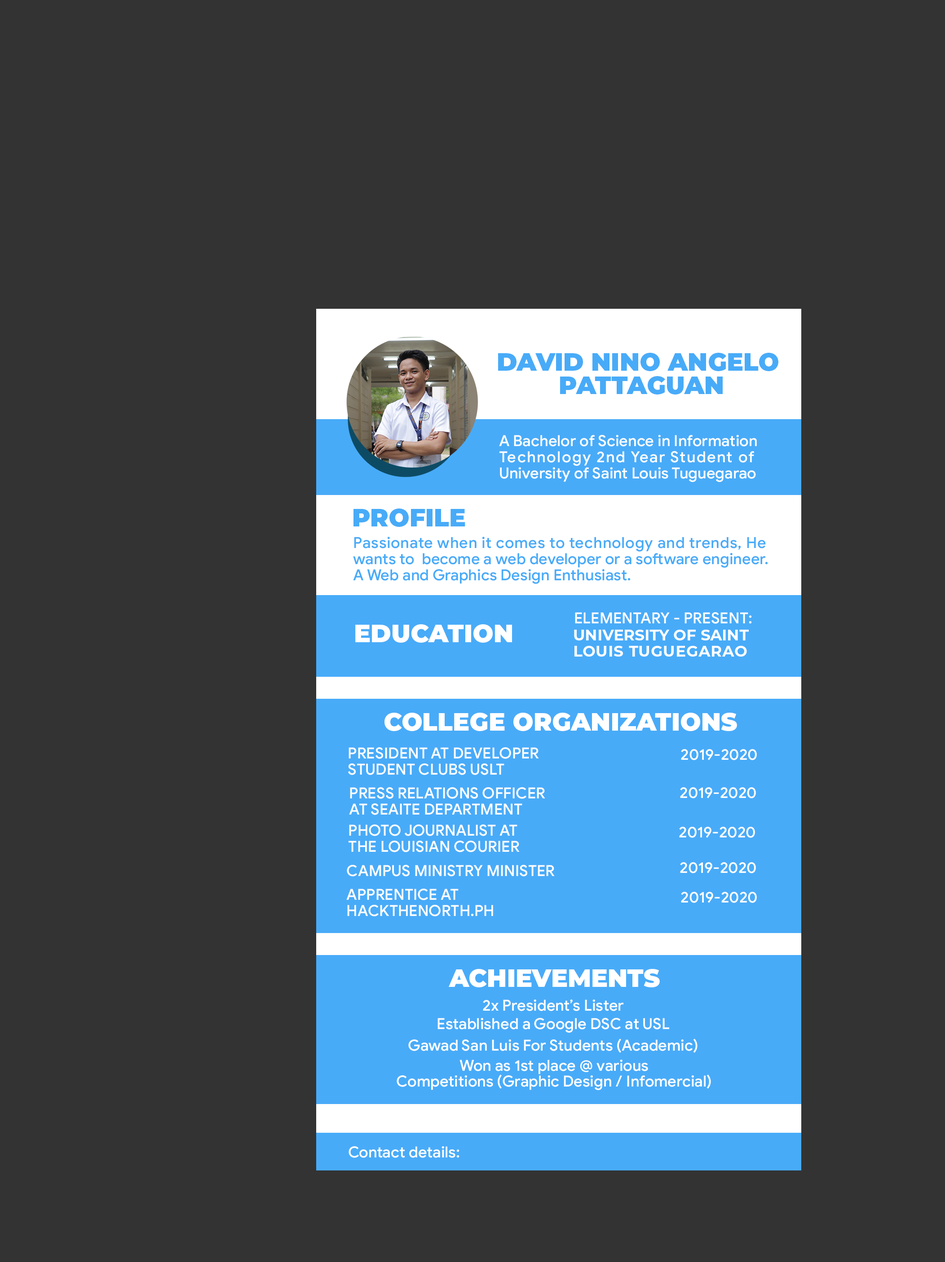
<style>
.page{position:relative;width:945px;height:1262px;background:#333333}
.page>*{position:absolute;margin:0}
.t1{font:24.7px/23.3px "Montserrat-Black";color:#48abf8}
.t2{font:15.3px/16.2px "GoogleSans-Medium";color:#ffffff}
.t3{font:15.3px/16.2px "GoogleSans-Medium";letter-spacing:0.07em;color:#ffffff}
.t4{font:24.7px "Montserrat-Black";color:#48abf8}
.t5{font:15.3px/16.2px "GoogleSans-Medium";color:#48abf8}
.t6{font:15.3px/16.2px "GoogleSans-Medium";letter-spacing:0.024em;color:#48abf8}
.t7{font:15.3px "GoogleSans-Medium";color:#ffffff}
.t8{font:24.7px "Montserrat-Black";color:#ffffff}
.t9{font:15.3px/16.2px "Montserrat-Bold";color:#ffffff}
.t10{font:15.3px/16.2px "Montserrat-Bold";letter-spacing:0.03em;color:#ffffff}
.t11{font:15.3px/15.7px "GoogleSans-Medium";color:#ffffff}
</style>
<div class="page">
<p class="t1" style="left:498px;top:353px;width:280px;height:42px;text-align:center">DAVID NINO ANGELO <br>PATTAGUAN</p>
<p class="t2" style="left:499px;top:435px;width:257px;height:47px;text-align:right">A Bachelor of Science in Information <br><span class="t3">Technology 2nd Year Student of<br></span>University of Saint Louis Tuguegarao</p>
<p class="t4" style="left:353px;top:509px;width:112px;height:18px">PROFILE</p>
<p class="t5" style="left:353px;top:537px;width:415px;height:47px;text-align:right"><span class="t6">Passionate when it comes to technology and trends, He</span> <br>wants to  become a web developer or a software engineer.<br>A Web and Graphics Design Enthusiast.</p>
<p class="t7" style="left:575px;top:612px;width:177px;height:12px">ELEMENTARY - PRESENT:</p>
<p class="t8" style="left:355px;top:624px;width:157px;height:19px">EDUCATION</p>
<p class="t9" style="left:574px;top:630px;width:174px;height:27px;text-align:right">UNIVERSITY OF SAINT <br><span class="t10">LOUIS TUGUEGARAO</span></p>
<p class="t8" style="left:384px;top:713px;width:353px;height:18px">COLLEGE ORGANIZATIONS</p>
<p class="t2" style="left:348px;top:747px;width:191px;height:28px;text-align:right">PRESIDENT AT DEVELOPER <br>STUDENT CLUBS USLT</p>
<p class="t7" style="left:681px;top:749px;width:75px;height:12px">2019-2020</p>
<p class="t2" style="left:349px;top:787px;width:196px;height:28px;text-align:right">PRESS RELATIONS OFFICER<br>AT SEAITE DEPARTMENT</p>
<p class="t7" style="left:680px;top:787px;width:76px;height:12px">2019-2020</p>
<p class="t2" style="left:348px;top:825px;width:171px;height:28px;text-align:right">PHOTO JOURNALIST AT<br>THE LOUISIAN COURIER</p>
<p class="t7" style="left:679px;top:827px;width:76px;height:11px">2019-2020</p>
<p class="t7" style="left:347px;top:865px;width:207px;height:12px">CAMPUS MINISTRY MINISTER</p>
<p class="t7" style="left:680px;top:862px;width:76px;height:12px">2019-2020</p>
<p class="t2" style="left:346px;top:889px;width:147px;height:28px;text-align:right">APPRENTICE AT <br>HACKTHENORTH.PH</p>
<p class="t7" style="left:681px;top:892px;width:75px;height:11px">2019-2020</p>
<p class="t8" style="left:448px;top:969px;width:211px;height:19px">ACHIEVEMENTS</p>
<p class="t7" style="left:483px;top:1000px;width:140px;height:11px">2x President’s Lister</p>
<p class="t7" style="left:437px;top:1018px;width:232px;height:15px">Established a Google DSC at USL</p>
<p class="t7" style="left:408px;top:1039px;width:289px;height:14px">Gawad San Luis For Students (Academic)</p>
<p class="t11" style="left:396px;top:1060px;width:315px;height:30px;text-align:center">Won as 1st place @ various<br>Competitions (Graphic Design / Infomercial)</p>
<p class="t7" style="left:348px;top:1147px;width:111px;height:11px">Contact details:</p>
</div>
